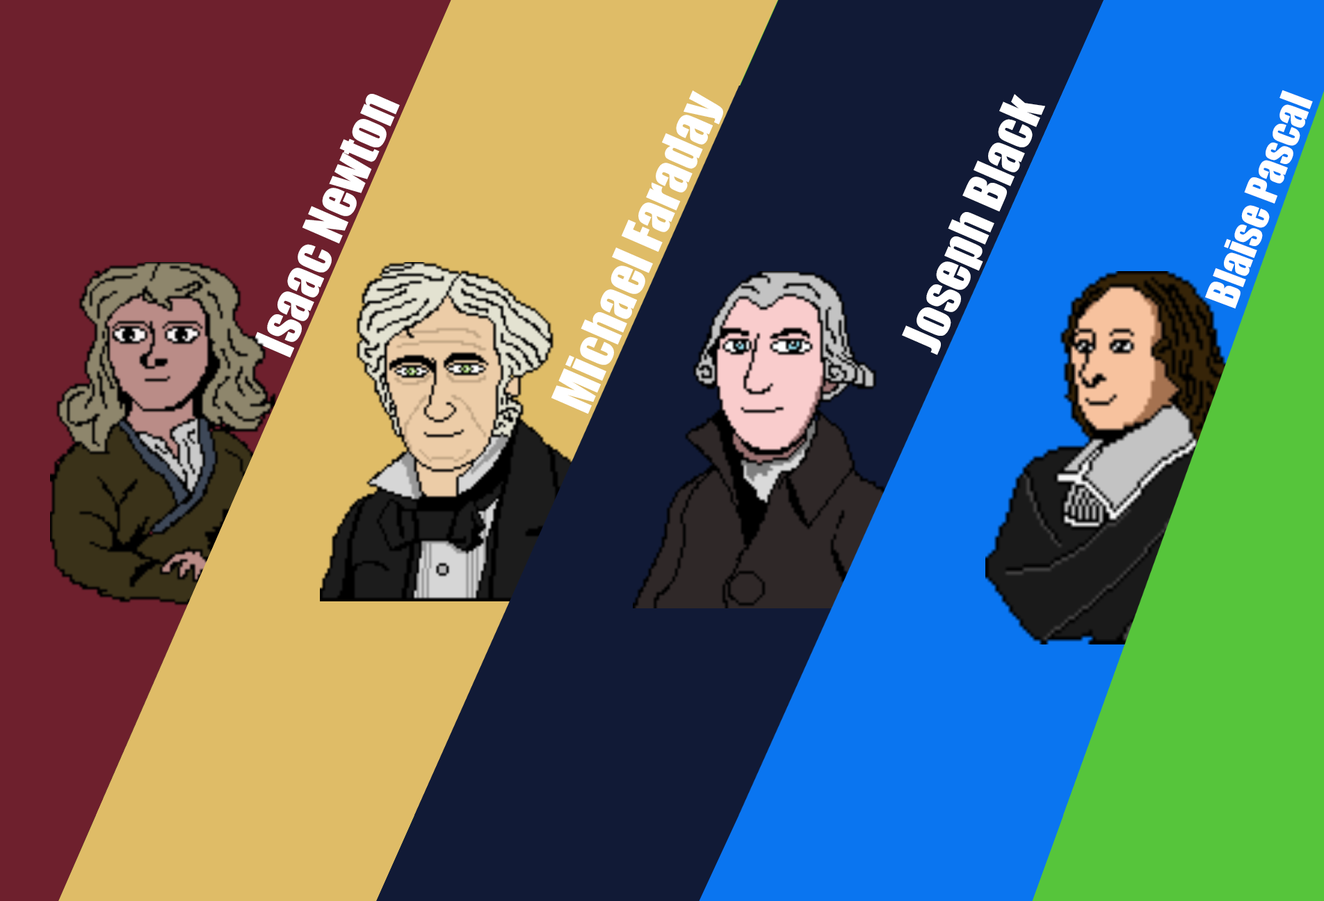
<style>
.page{position:relative;width:1324px;height:901px}
.page>*{position:absolute;margin:0}
.t1{font:40.6px "Impact";color:#ffffff}
.t2{font:50.7px "Impact";color:#ffffff}
</style>
<div class="page">
<p class="t1" style="left:1205px;top:90px;width:107px;height:219px;rotate:-69deg">Blaise Pascal</p>
<p class="t2" style="left:253px;top:94px;width:147px;height:264px;rotate:-67deg">Isaac Newton</p>
<p class="t2" style="left:551px;top:90px;width:172px;height:324px;rotate:-67deg">Michael Faraday</p>
<p class="t2" style="left:902px;top:94px;width:143px;height:261px;rotate:-67deg">Joseph Black</p>
</div>
